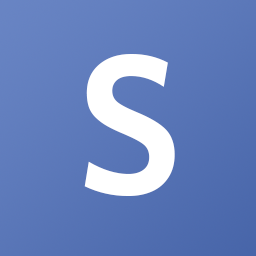
<style>
.page{position:relative;width:256px;height:256px}
.page>*{position:absolute;margin:0}
.t1{font:200px "Whitney-Semibold";color:#ffffff}
</style>
<div class="page">
<p class="t1" style="left:84px;top:54px;width:91px;height:142px">S</p>
</div>
